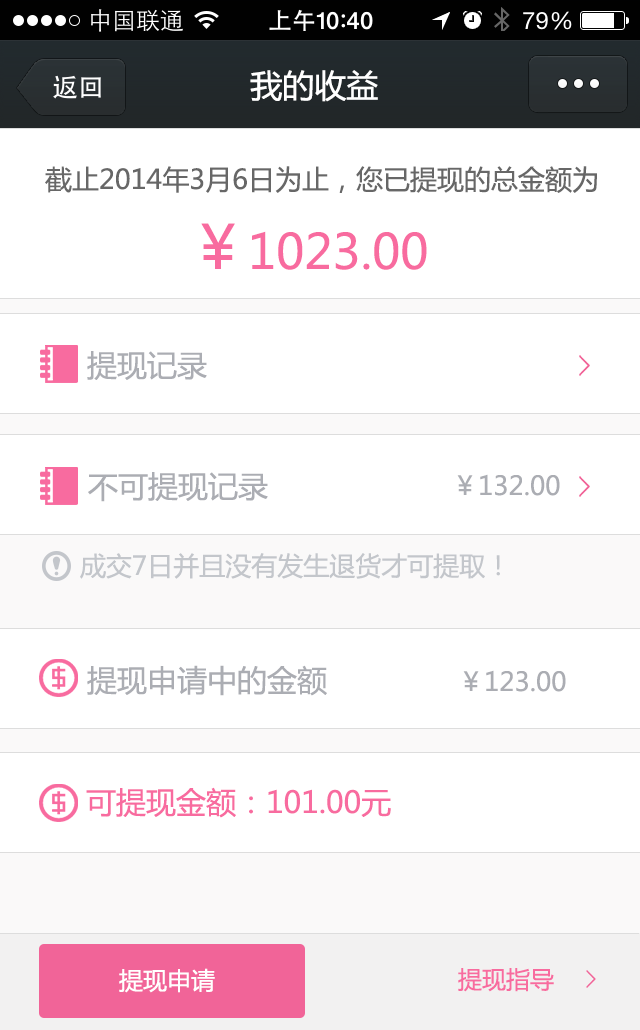
<style>
.page{position:relative;width:640px;height:1030px;background:#ffffff}
.page>*{position:absolute;margin:0}
.t1{font:32px "MicrosoftYaHei";color:#ffffff}
.t2{font:27px "MicrosoftYaHei";color:#676767}
.t3{font:48px "MicrosoftYaHei";color:#f86b9f}
.t4{font:60px "MicrosoftYaHei";color:#f86b9f}
.t5{font:30px "MicrosoftYaHei";color:#abadb3}
.t6{font:26px "MicrosoftYaHei";color:#abadb3}
.t7{font:26px "MicrosoftYaHei";color:#c3c6cb}
.t8{font:30px "MicrosoftYaHei";color:#f86b9f}
.t9{font:24px "MicrosoftYaHei";color:#ffffff}
.t10{font:24px "MicrosoftYaHei";color:#f86b9f}
</style>
<div class="page">
<p class="t1" style="left:250px;top:70px;width:128px;height:32px">我的收益</p>
<p class="t2" style="left:45px;top:166px;width:552px;height:27px">截止2014年3月6日为止，您已提现的总金额为</p>
<p class="t3" style="left:201px;top:223px;width:226px;height:47px"><span class="t4">￥</span>1023.00</p>
<p class="t5" style="left:87px;top:351px;width:120px;height:29px">提现记录</p>
<p class="t5" style="left:88px;top:472px;width:180px;height:30px">不可提现记录</p>
<p class="t6" style="left:457px;top:474px;width:103px;height:22px">￥132.00</p>
<p class="t7" style="left:80px;top:553px;width:420px;height:26px">成交7日并且没有发生退货才可提取！</p>
<p class="t5" style="left:87px;top:665px;width:240px;height:31px">提现申请中的金额</p>
<p class="t6" style="left:463px;top:670px;width:103px;height:22px">￥123.00</p>
<p class="t8" style="left:86px;top:787px;width:305px;height:31px">可提现金额：101.00元</p>
<p class="t9" style="left:119px;top:968px;width:96px;height:25px">提现申请</p>
<p class="t10" style="left:458px;top:968px;width:96px;height:24px">提现指导</p>
</div>
